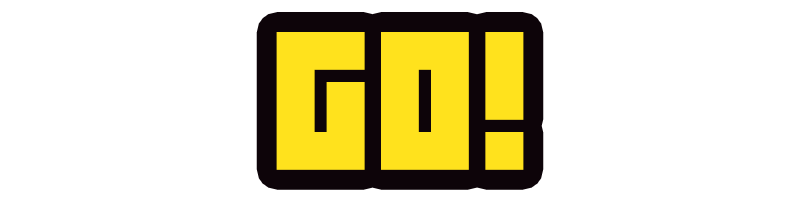
<style>
.page{position:relative;width:800px;height:200px;background:#ffffff}
.page>*{position:absolute;margin:0}
.t1{font:175px "04b19";letter-spacing:0.025em;color:#ffe21d}
</style>
<div class="page">
<p class="t1" style="left:276px;top:32px;width:248px;height:138px">GO!</p>
</div>
